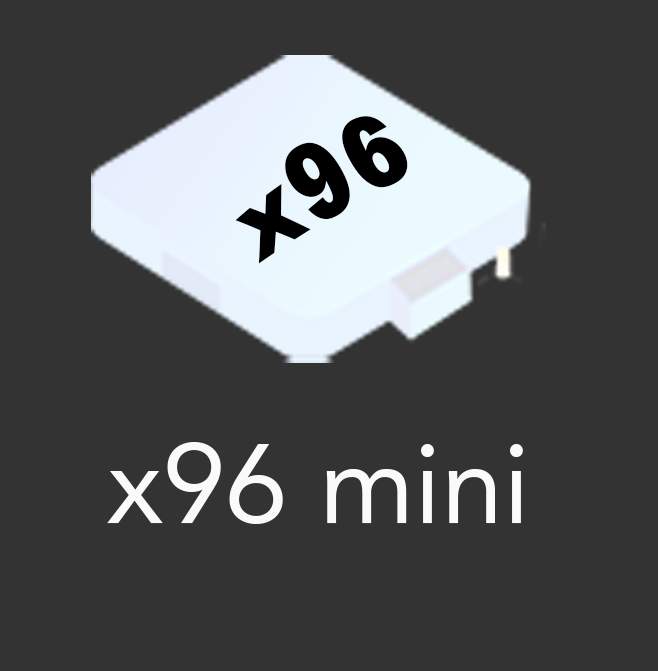
<style>
.page{position:relative;width:658px;height:671px;background:#333333}
.page>*{position:absolute;margin:0}
.t1{font:93.6px "Arial-Black";color:#010000}
.t2{font:111.9px "Avenir-Roman";color:#fafafa}
</style>
<div class="page">
<p class="t1" style="left:235px;top:116px;width:173px;height:148px;rotate:-31deg">x96</p>
<p class="t2" style="left:107px;top:442px;width:416px;height:82px">x96 mini</p>
</div>
